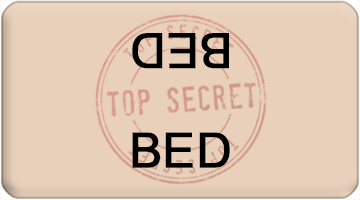
<style>
.page{position:relative;width:360px;height:200px;background:#e8d0bb}
.page>*{position:absolute;margin:0}
.t1{font:48px "ArialMT";color:#000000;font-weight:bold}
</style>
<div class="page">
<p class="t1" style="left:132px;top:33px;width:97px;height:36px;rotate:180deg">BED</p>
<p class="t1" style="left:132px;top:132px;width:98px;height:36px">BED</p>
</div>
